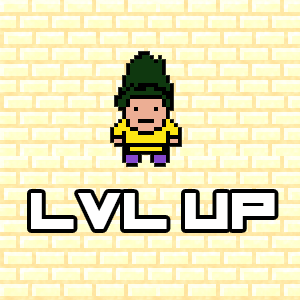
<style>
.page{position:relative;width:300px;height:300px}
.page>*{position:absolute;margin:0}
.t1{font:50.7px "Basicav.2012";letter-spacing:0.04em;color:#ffffff}
.t2{font:50.7px "ArtBrush";letter-spacing:0.04em;color:#ffffff}
</style>
<div class="page">
<p class="t1" style="left:31px;top:193px;width:244px;height:36px"><span class="t2"><br></span>lvl up</p>
</div>
